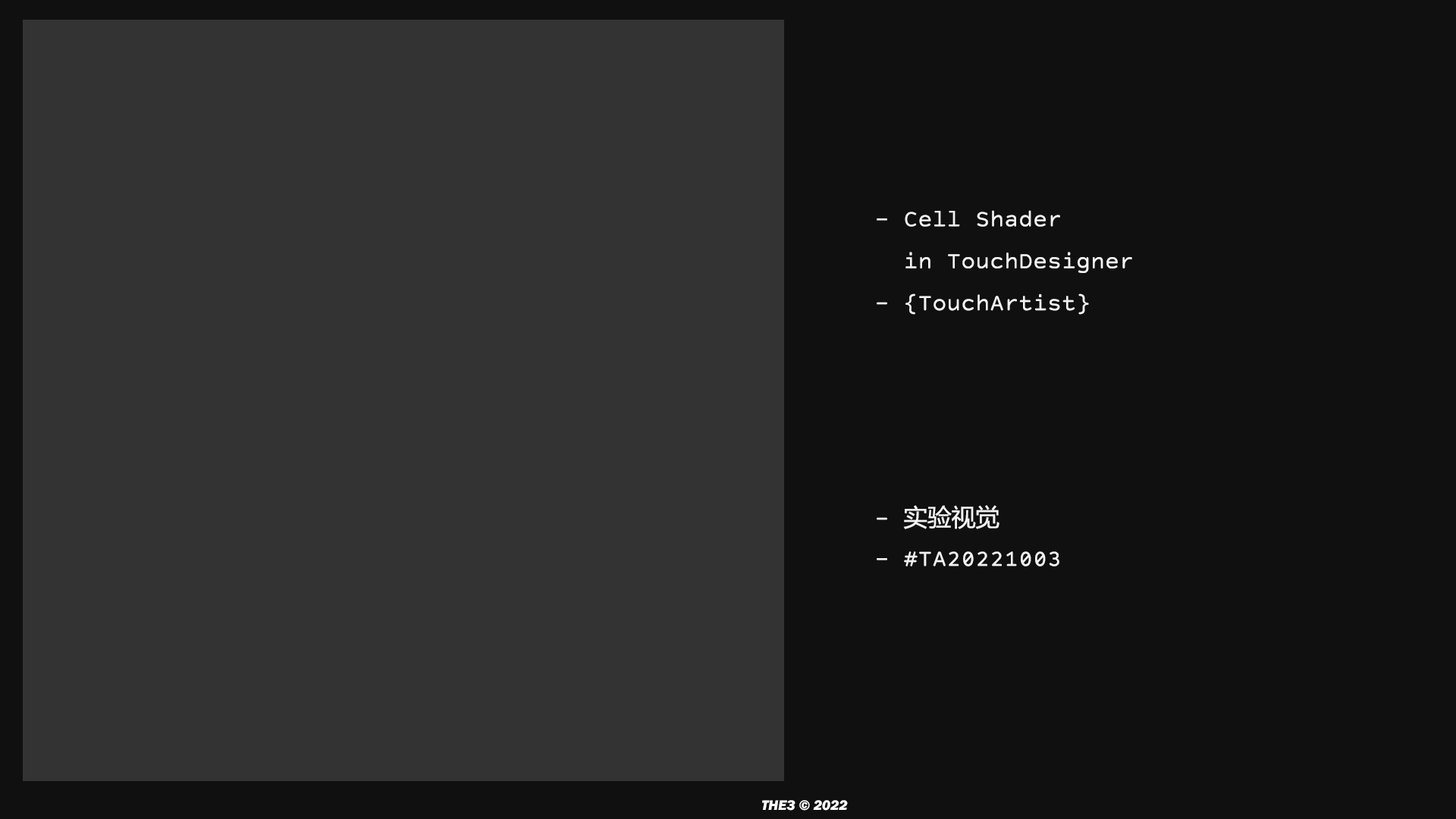
<style>
.page{position:relative;width:1456px;height:819px;background:#101010}
.page>*{position:absolute;margin:0}
.t1{font:24px "CourierPrimeCode-Regular";color:#f3f3f3}
.t2{font:24px "MicrosoftYaHei";color:#f3f3f3}
.t3{font:14.1px "FranklinGothic-HeavyItalic";color:#ffffff}
</style>
<div class="page">
<p class="t1" style="left:877px;top:210px;width:255px;height:105px">- Cell Shader<br>  in TouchDesigner<br>- {TouchArtist}</p>
<p class="t1" style="left:877px;top:505px;width:182px;height:61px">- <span class="t2">实验视觉<br></span>- #TA20221003</p>
<p class="t3" style="left:762px;top:800px;width:86px;height:11px">THE3 © 2022</p>
</div>
